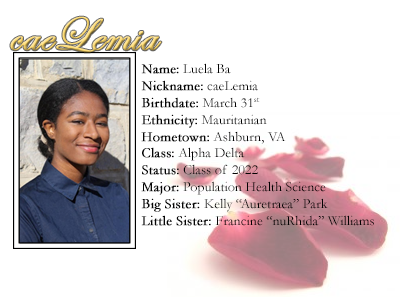
<style>
.page{position:relative;width:400px;height:300px;background:#ffffff}
.page>*{position:absolute;margin:0}
.t1{font:48px "EdwardianScriptITC";font-weight:bold}
.t2{font:14px "Garamond";color:#000000}
.t3{font:14px "Garamond";color:#000000;font-weight:bold}
</style>
<div class="page">
<p class="t1" style="left:10px;top:16px;width:152px;height:37px">caeLemia</p>
<p class="t2" style="left:141px;top:63px;width:233px;height:163px"><span class="t3">Name:</span> Luela Ba<br><span class="t3">Nickname:</span> caeLemia<br><span class="t3">Birthdate:</span> March 31st<br><span class="t3">Ethnicity:</span> Mauritanian<br><span class="t3">Hometown:</span> Ashburn, VA<br><span class="t3">Class:</span> Alpha Delta<br><span class="t3">Status:</span> Class of 2022<br><span class="t3">Major:</span> Population Health Science<br><span class="t3">Big Sister: </span>Kelly “Auretraea” Park<br><span class="t3">Little Sister: </span>Francine “nuRhida” Williams</p>
</div>
